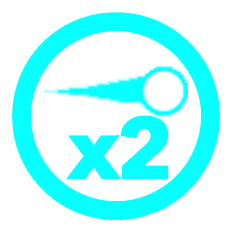
<style>
.page{position:relative;width:232px;height:233px;background:#ffffff}
.page>*{position:absolute;margin:0}
.t1{font:86px "AvenirNextLTPro-Bold";letter-spacing:-0.055em;color:#08ffff;font-weight:bold}
</style>
<div class="page">
<p class="t1" style="left:66px;top:115px;width:103px;height:64px">x2</p>
</div>
